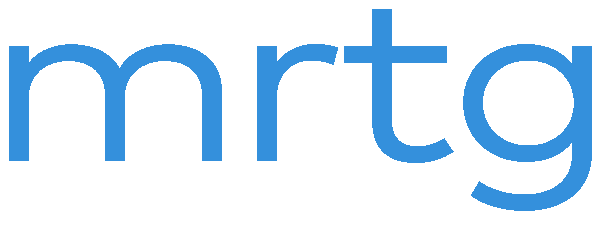
<style>
.page{position:relative;width:601px;height:225px;background:#ffffff}
.page>*{position:absolute;margin:0}
.t1{font:243.5px "MarkPro";letter-spacing:-0.04em;color:#3490dc;scale:1.11 1}
</style>
<div class="page">
<p class="t1" style="left:9px;top:9px;width:583px;height:202px">mrtg</p>
</div>
